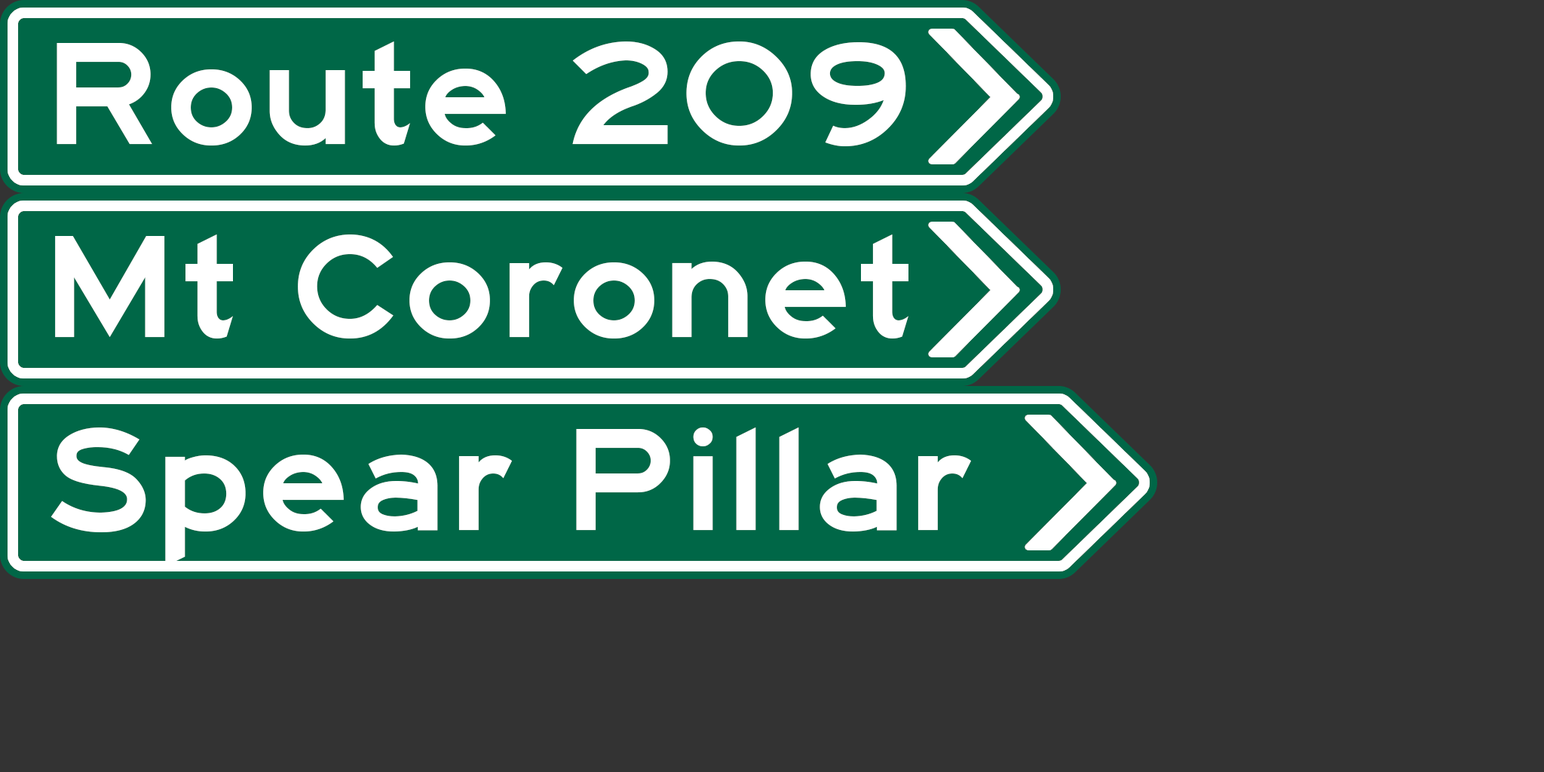
<style>
.page{position:relative;width:1544px;height:772px;background:#333333}
.page>*{position:absolute;margin:0}
.t1{font:150.8px "HighwayGothicExpanded";color:#ffffff}
</style>
<div class="page">
<p class="t1" style="left:57px;top:41px;width:849px;height:105px">Route 209</p>
<p class="t1" style="left:55px;top:235px;width:854px;height:104px">Mt Coronet</p>
<p class="t1" style="left:51px;top:428px;width:920px;height:138px">Spear Pillar</p>
</div>
